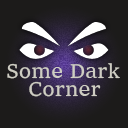
<style>
.page{position:relative;width:128px;height:128px;background:#1c1b1a}
.page>*{position:absolute;margin:0}
.t1{font:20.8px "Sitka-Small";color:#cecdc3}
</style>
<div class="page">
<p class="t1" style="left:7px;top:63px;width:113px;height:16px">Some Dark</p>
<p class="t1" style="left:29px;top:81px;width:72px;height:16px">Corner</p>
</div>
